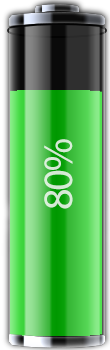
<style>
.page{position:relative;width:110px;height:350px}
.page>*{position:absolute;margin:0}
.t1{font:42px "MyriadPro-Regular";letter-spacing:-0.05em;color:#d5ead5}
</style>
<div class="page">
<p class="t1" style="left:44px;top:139px;width:29px;height:70px;rotate:-90deg">80%</p>
</div>
